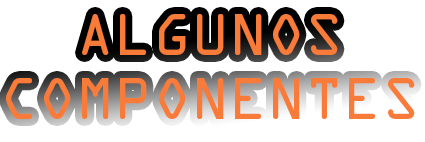
<style>
.page{position:relative;width:425px;height:142px;background:#ffffff}
.page>*{position:absolute;margin:0}
.t1{font:53px "OCRAStd";color:#f87b3a}
</style>
<div class="page">
<p class="t1" style="left:6px;top:14px;width:409px;height:105px">ALGUNOS<br>COMPONENTES</p>
</div>
